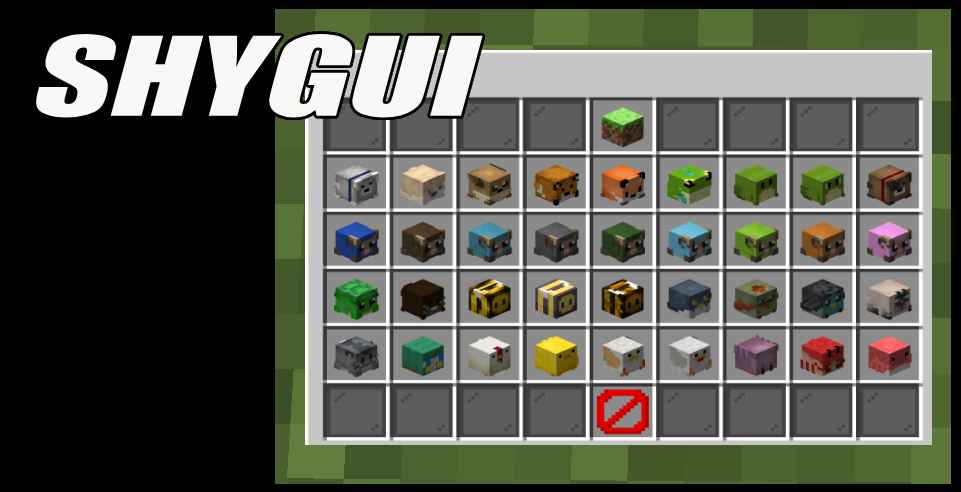
<style>
.page{position:relative;width:961px;height:492px;background:#000000}
.page>*{position:absolute;margin:0}
.t1{font:101.4px "Impact";color:#faf7f7;text-transform:uppercase;font-style:italic;scale:1.48 1}
</style>
<div class="page">
<p class="t1" style="left:36px;top:34px;width:447px;height:84px">SHYGUI</p>
</div>
